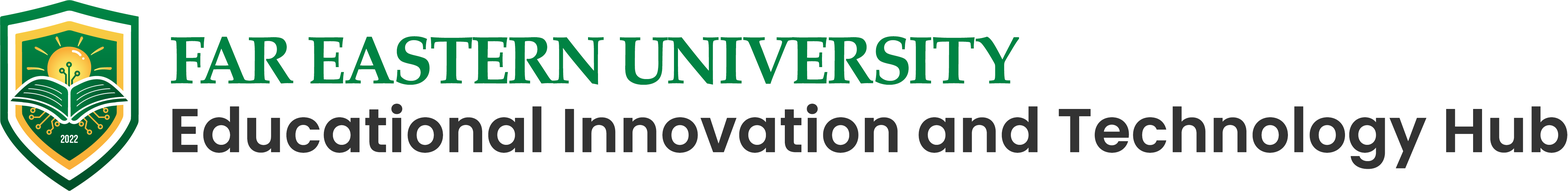
<style>
.page{position:relative;width:1568px;height:191px;background:#ffffff}
.page>*{position:absolute;margin:0}
.t1{font:68.7px "PalladioBold";letter-spacing:-0.02em;color:#008343}
.t2{font:61.4px "Poppins-SemiBold";letter-spacing:-0.02em;color:#333333;font-weight:bold}
</style>
<div class="page">
<p class="t1" style="left:171px;top:36px;width:848px;height:49px">FAR EASTERN UNIVERSITY</p>
<p class="t2" style="left:172px;top:104px;width:1395px;height:65px">Educational Innovation and Technology Hub</p>
</div>
